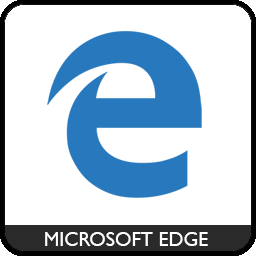
<style>
.page{position:relative;width:256px;height:256px;background:#ffffff}
.page>*{position:absolute;margin:0}
.t1{font:20px "GillSansMT";color:#ffffff}
</style>
<div class="page">
<p class="t1" style="left:45px;top:232px;width:163px;height:14px">MICROSOFT EDGE</p>
</div>
